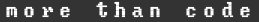
<style>
.page{position:relative;width:259px;height:22px;background:#333333}
.page>*{position:absolute;margin:0}
.t1{font:26.6px "Code";color:#ffffff;scale:0.9 1}
</style>
<div class="page">
<p class="t1" style="left:6px;top:1px;width:244px;height:17px">more than code</p>
</div>
